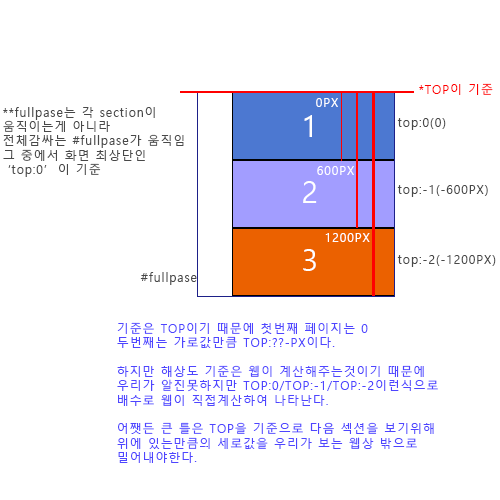
<style>
.page{position:relative;width:500px;height:500px;background:#ffffff}
.page>*{position:absolute;margin:0}
.t1{font:12px "MalgunGothic";letter-spacing:0.075em;color:#ff0000}
.t2{font:12px "MalgunGothic";letter-spacing:0.075em;color:#ffffff}
.t3{font:12px "MalgunGothic";letter-spacing:0.075em;color:#484848}
.t4{font:30px "MalgunGothic";letter-spacing:0.075em;color:#ffffff}
.t5{font:12px "MalgunGothic";letter-spacing:0.075em;color:#4e45ff}
</style>
<div class="page">
<p class="t1" style="left:419px;top:83px;width:74px;height:12px">*TOP이 기준</p>
<p class="t2" style="left:316px;top:98px;width:22px;height:9px">0PX</p>
<p class="t3" style="left:3px;top:107px;width:181px;height:70px">**fullpase는 각 section이<br>움직이는게 아니라<br>전체감싸는 #fullpase가 움직임<br>그 중에서 화면 최상단인<br> ‘top:0’  이 기준</p>
<p class="t4" style="left:304px;top:115px;width:8px;height:22px">1</p>
<p class="t3" style="left:397px;top:118px;width:49px;height:12px">top:0(0)</p>
<p class="t2" style="left:317px;top:166px;width:37px;height:9px">600PX</p>
<p class="t4" style="left:303px;top:181px;width:14px;height:22px">2</p>
<p class="t3" style="left:397px;top:185px;width:91px;height:12px">top:-1(-600PX)</p>
<p class="t2" style="left:325px;top:233px;width:45px;height:9px">1200PX</p>
<p class="t4" style="left:303px;top:249px;width:13px;height:22px">3</p>
<p class="t3" style="left:397px;top:255px;width:99px;height:12px">top:-2(-1200PX)</p>
<p class="t3" style="left:140px;top:272px;width:57px;height:13px">#fullpase</p>
<p class="t5" style="left:117px;top:322px;width:321px;height:141px">기준은 TOP이기 때문에 첫번째 페이지는 0<br>두번째는 가로값만큼 TOP:??-PX이다.<br><br>하지만 해상도 기준은 웹이 계산해주는것이기 때문에<br>우리가 알진못하지만 TOP:0/TOP:-1/TOP:-2이런식으로<br>배수로 웹이 직접계산하여 나타난다.<br><br>어쨋든 큰 틀은 TOP을 기준으로 다음 섹션을 보기위해<br>위에 있는만큼의 세로값을 우리가 보는 웹상 밖으로<br>밀어내야한다.</p>
</div>
